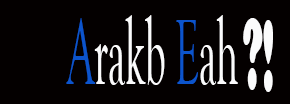
<style>
.page{position:relative;width:290px;height:104px;background:#040000}
.page>*{position:absolute;margin:0}
.t1{font:96.3px "GoudyOldStyleT-Regular";color:#fbfbfc;scale:0.42 1}
.t2{font:96.3px "GoudyOldStyleT-Regular";color:#0c54cc;scale:0.42 1}
.t3{font:106.4px "CooperBlack";color:#fbfbfc;scale:0.38 1}
</style>
<div class="page">
<p class="t1" style="left:66px;top:15px;width:172px;height:70px"><span class="t2">A</span>rakb <span class="t2">E</span>ah</p>
<p class="t3" style="left:243px;top:18px;width:20px;height:72px">?</p>
<p class="t3" style="left:263px;top:20px;width:10px;height:72px">!</p>
</div>
